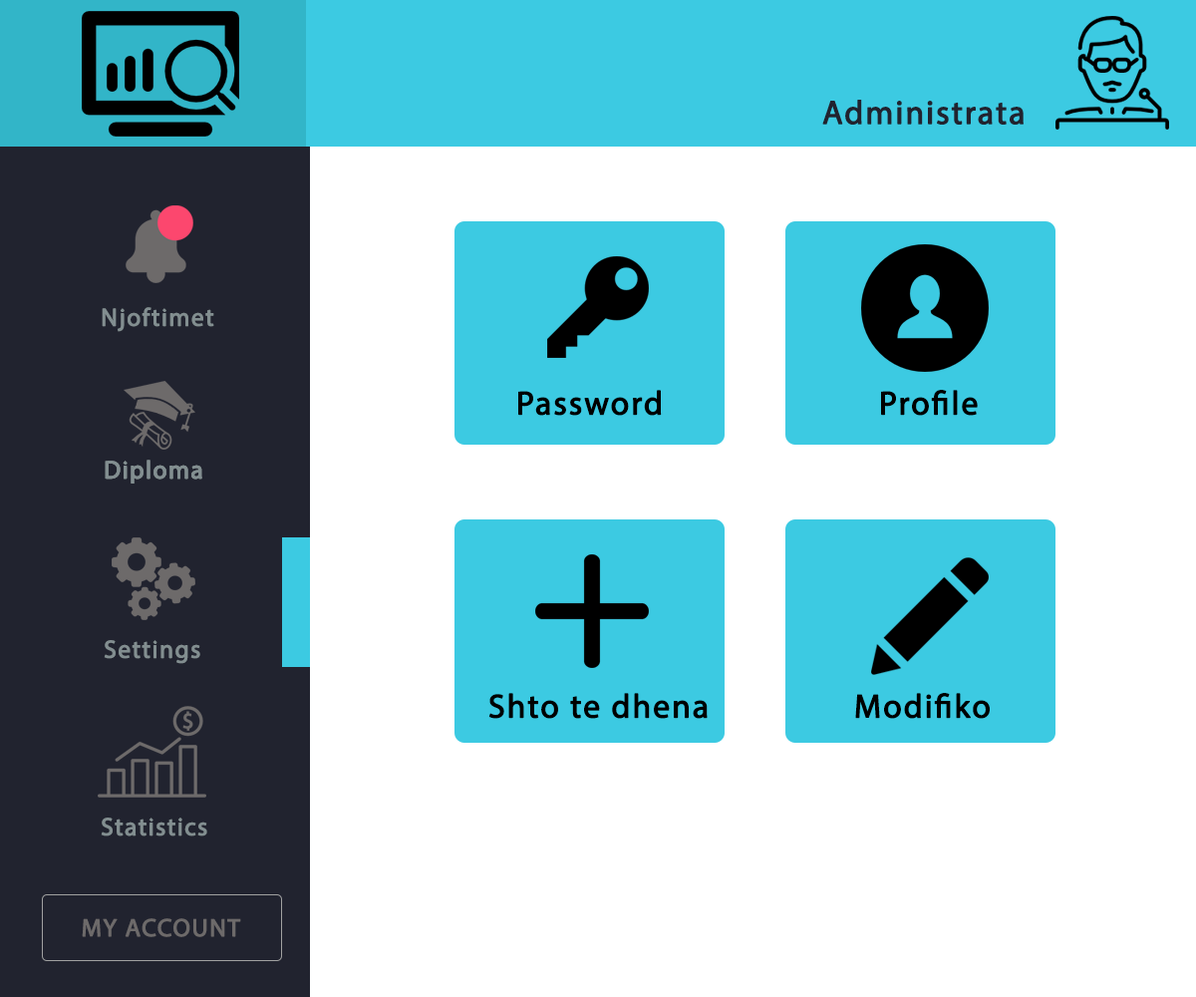
<style>
.page{position:relative;width:1196px;height:997px;background:#ffffff}
.page>*{position:absolute;margin:0}
.t1{font:33.2px "MyriadPro-Regular";letter-spacing:0.04em;color:#21232f;font-weight:bold}
.t2{font:24.9px "MyriadPro-Regular";letter-spacing:0.04em;color:#828e90;font-weight:bold}
.t3{font:33.2px "MyriadPro-Regular";letter-spacing:0.04em;color:#000000;font-weight:bold}
.t4{font:24.9px "MyriadPro-Regular";letter-spacing:0.04em;color:#6d6a6a;font-weight:bold}
</style>
<div class="page">
<p class="t1" style="left:822px;top:100px;width:202px;height:25px">Administrata</p>
<p class="t2" style="left:102px;top:307px;width:112px;height:25px">Njoftimet</p>
<p class="t3" style="left:518px;top:390px;width:144px;height:26px">Password</p>
<p class="t3" style="left:881px;top:390px;width:97px;height:26px">Profile</p>
<p class="t2" style="left:105px;top:460px;width:97px;height:23px">Diploma</p>
<p class="t2" style="left:105px;top:460px;width:97px;height:23px">Diploma</p>
<p class="t2" style="left:104px;top:640px;width:96px;height:24px">Settings</p>
<p class="t3" style="left:488px;top:693px;width:220px;height:26px">Shto te dhena</p>
<p class="t3" style="left:855px;top:693px;width:135px;height:26px">Modifiko</p>
<p class="t2" style="left:101px;top:817px;width:106px;height:19px">Statistics</p>
<p class="t4" style="left:82px;top:918px;width:159px;height:19px">MY ACCOUNT</p>
</div>
